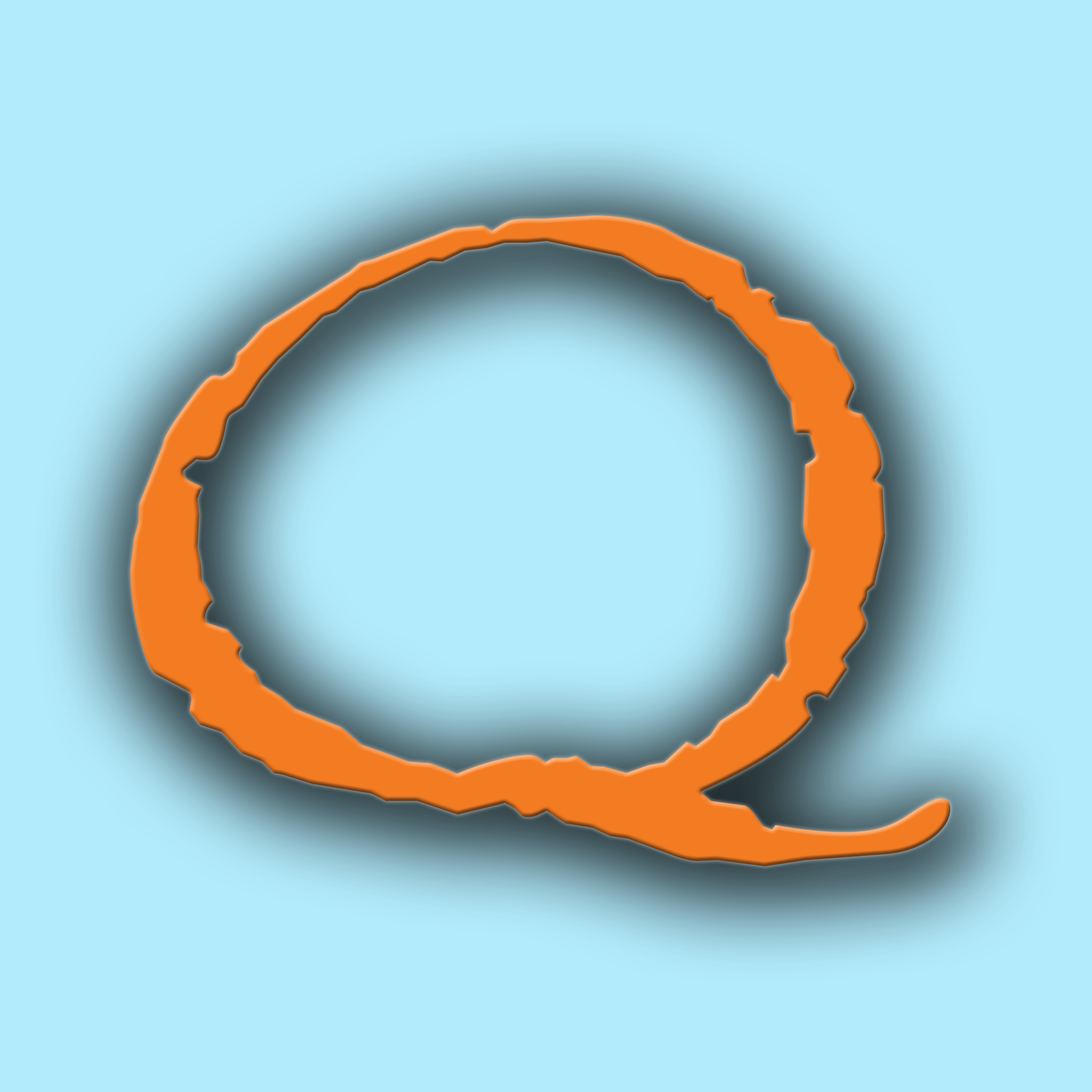
<style>
.page{position:relative;width:1092px;height:1092px;background:#b2ebfc}
.page>*{position:absolute;margin:0}
.t1{font:897.4px "Papyrus";color:#f37b21}
</style>
<div class="page">
<p class="t1" style="left:130px;top:215px;width:821px;height:651px">Q</p>
</div>
